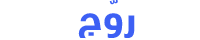
<style>
.page{position:relative;width:200px;height:40px;background:#ffffff}
.page>*{position:absolute;margin:0}
.t1{font:34px "Swissra-Heavy";letter-spacing:0.005em;color:#3d60f4}
</style>
<div class="page">
<p class="t1" style="left:78px;top:0px;width:57px;height:39px">روّج</p>
</div>
